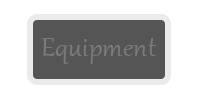
<style>
.page{position:relative;width:200px;height:100px;background:#ffffff}
.page>*{position:absolute;margin:0}
.t1{font:33.3px "Gabriola";color:#7a7a79}
</style>
<div class="page">
<p class="t1" style="left:41px;top:38px;width:116px;height:26px">Equipment</p>
</div>
